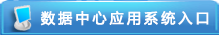
<style>
.page{position:relative;width:219px;height:35px}
.page>*{position:absolute;margin:0}
.t1{font:14px "MicrosoftYaHei";letter-spacing:0.2em;color:#ffffff;font-weight:bold}
</style>
<div class="page">
<p class="t1" style="left:40px;top:10px;width:169px;height:16px">数据中心应用系统入口</p>
</div>
